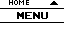
<style>
.page{position:relative;width:64px;height:32px;background:#ffffff}
.page>*{position:absolute;margin:0}
.t1{font:8px "04b03";color:#000000;scale:1.06 1}
.t2{font:14px "ArcadeClassic";color:#000000;scale:1.05 1}
</style>
<div class="page">
<p class="t1" style="left:9px;top:0px;width:20px;height:5px">HOME</p>
<p class="t2" style="left:17px;top:12px;width:31px;height:7px">MENU</p>
</div>
